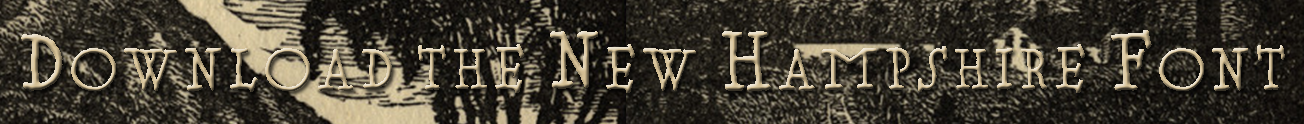
<style>
.page{position:relative;width:1304px;height:124px}
.page>*{position:absolute;margin:0}
.t1{font:72px "NewHampshire-Regular"}
</style>
<div class="page">
<p class="t1" style="left:21px;top:30px;width:1264px;height:63px">Download the New Hampshire Font</p>
</div>
